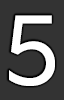
<style>
.page{position:relative;width:64px;height:100px;background:#333333}
.page>*{position:absolute;margin:0}
.t1{font:100px "Amiko-Regular";color:#ffffff}
</style>
<div class="page">
<p class="t1" style="left:9px;top:15px;width:46px;height:71px">5</p>
</div>
